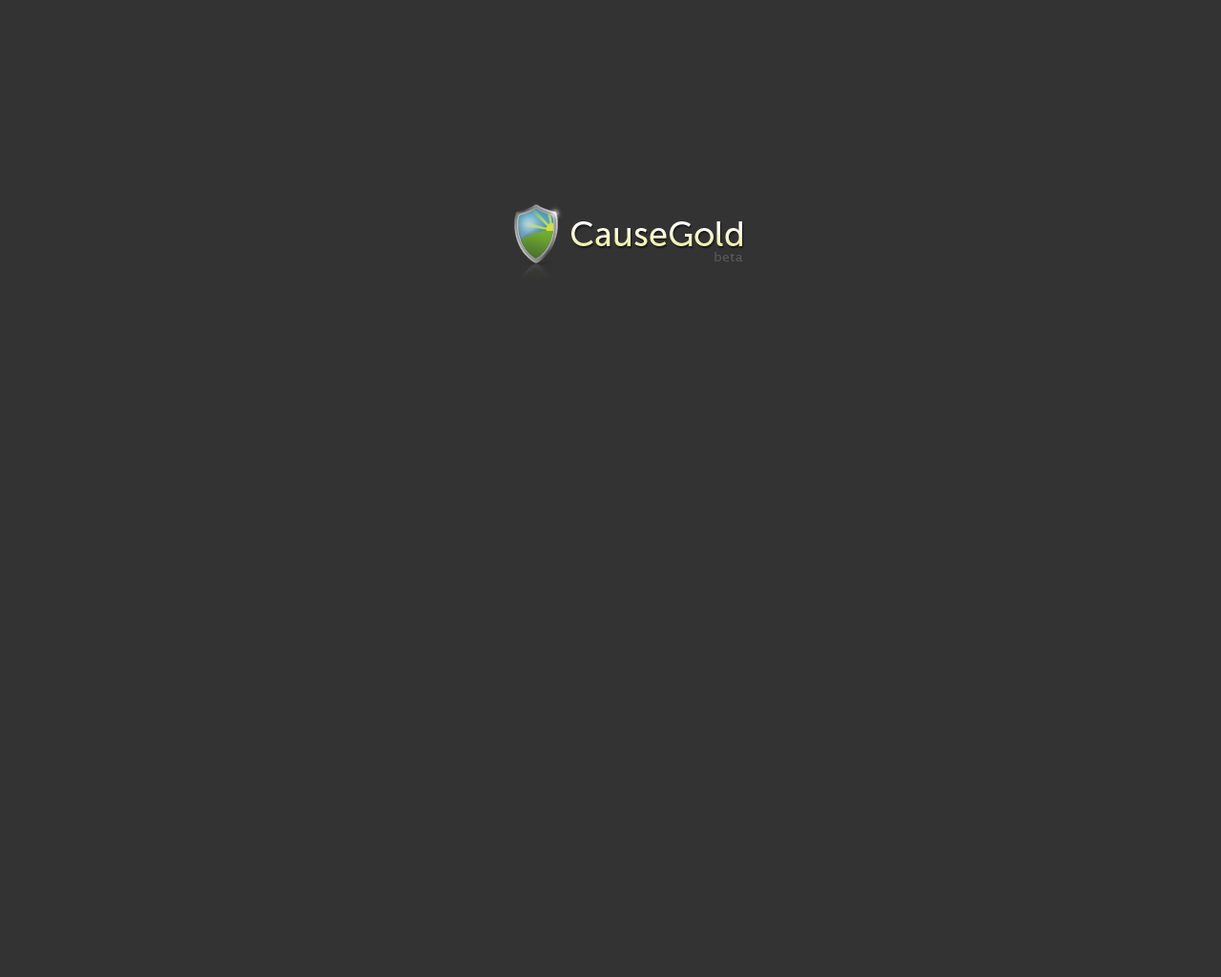
<style>
.page{position:relative;width:1221px;height:977px;background:#333333}
.page>*{position:absolute;margin:0}
.t1{font:34.3px "MuseoSans-500"}
.t2{font:13.4px "LucidaGrande";letter-spacing:0.02em;color:#575757}
</style>
<div class="page">
<p class="t1" style="left:571px;top:221px;width:171px;height:25px">CauseGold</p>
<p class="t2" style="left:714px;top:252px;width:29px;height:9px">beta</p>
</div>
